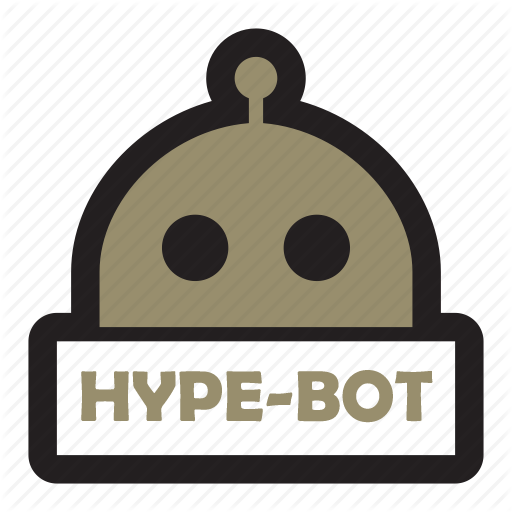
<style>
.page{position:relative;width:512px;height:512px;background:#ffffff}
.page>*{position:absolute;margin:0}
.t1{font:72px "BerlinSansFBDemi-Bold";color:#988e6d}
</style>
<div class="page">
<p class="t1" style="left:81px;top:370px;width:352px;height:53px">HYPE-BOT</p>
</div>
